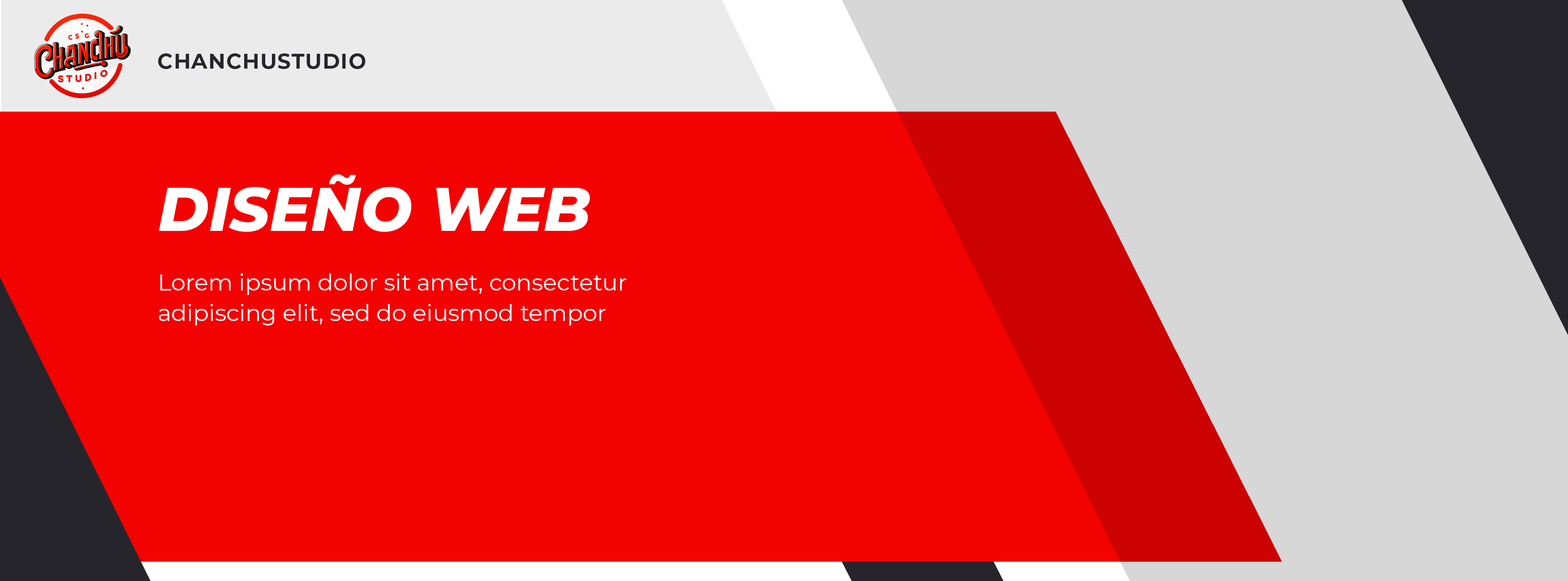
<style>
.page{position:relative;width:1568px;height:581px;background:#f30202}
.page>*{position:absolute;margin:0}
.t1{font:21px "Montserrat-Bold";letter-spacing:0.04em;color:#26252b;text-transform:uppercase}
.t2{font:61.4px "Montserrat-ExtraBoldItalic";color:#ffffff;text-transform:uppercase}
.t3{font:23px/30.7px "Montserrat-Regular";color:#fefefe}
</style>
<div class="page">
<p class="t1" style="left:158px;top:53px;width:208px;height:16px">chanchustudio</p>
<p class="t2" style="left:159px;top:174px;width:431px;height:58px">Diseño web</p>
<p class="t3" style="left:159px;top:273px;width:467px;height:52px">Lorem ipsum dolor sit amet, consectetur adipiscing elit, sed do eiusmod tempor</p>
</div>
